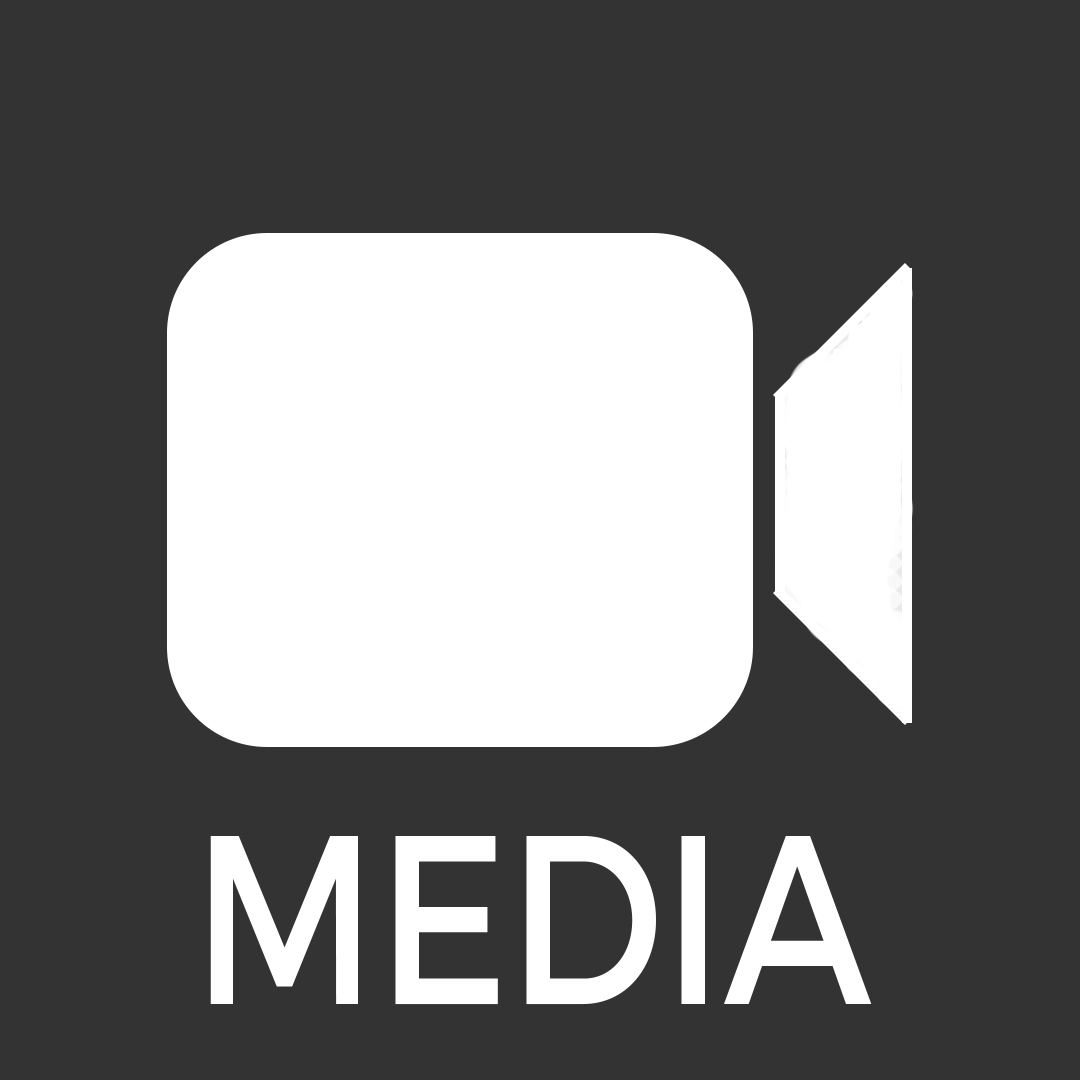
<style>
.page{position:relative;width:1080px;height:1080px;background:#333333}
.page>*{position:absolute;margin:0}
.t1{font:240px "Montserrat-Regular";color:#ffffff;scale:0.83 1}
</style>
<div class="page">
<p class="t1" style="left:210px;top:836px;width:662px;height:169px">MEDIA</p>
</div>
